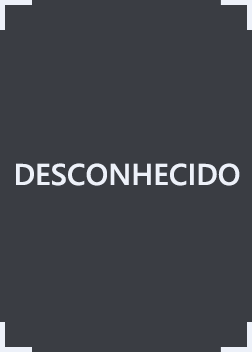
<style>
.page{position:relative;width:252px;height:352px;background:#3a3d43}
.page>*{position:absolute;margin:0}
.t1{font:30px "YuGothicUI-Bold";color:#edf1f9}
</style>
<div class="page">
<p class="t1" style="left:16px;top:163px;width:224px;height:23px">DESCONHECIDO</p>
</div>
